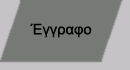
<style>
.page{position:relative;width:130px;height:70px;background:#767976}
.page>*{position:absolute;margin:0}
.t1{font:14.7px "ArialMT";color:#000000}
</style>
<div class="page">
<p class="t1" style="left:30px;top:23px;width:62px;height:15px">Έγγραφο</p>
</div>
